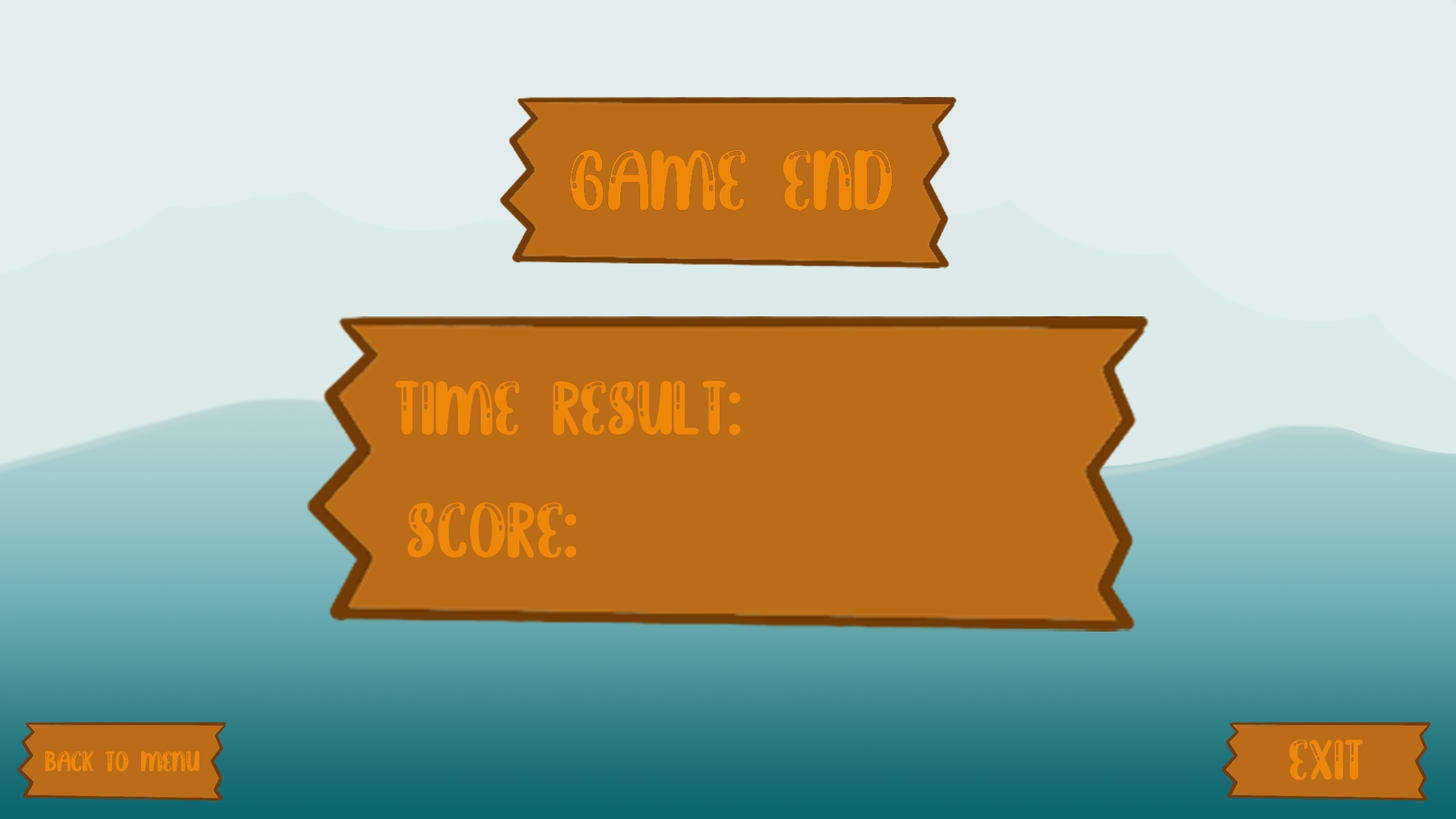
<style>
.page{position:relative;width:1456px;height:819px;background:#e2eceb}
.page>*{position:absolute;margin:0}
.t1{font:69.5px "BrighlyCrush-Shine";color:#ed8707}
.t2{font:61.7px "BrighlyCrush-Shine";color:#ed8707}
.t3{font:63.3px "BrighlyCrush-Shine";color:#ed8707}
.t4{font:46px "BrighlyCrush-Shine";color:#ed8707}
.t5{font:22.8px "BrighlyCrush-Shine";color:#ed8707}
</style>
<div class="page">
<p class="t1" style="left:570px;top:149px;width:323px;height:62px">Game End</p>
<p class="t2" style="left:395px;top:381px;width:345px;height:54px">Time Result:</p>
<p class="t3" style="left:407px;top:502px;width:169px;height:56px">Score:</p>
<p class="t4" style="left:1289px;top:739px;width:74px;height:41px">Exit</p>
<p class="t5" style="left:45px;top:751px;width:154px;height:21px">Back to menu</p>
</div>
